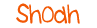
<style>
.page{position:relative;width:97px;height:28px;background:#ffffff}
.page>*{position:absolute;margin:0}
.t1{font:30.6px "BrookeShappell8";color:#f15805}
</style>
<div class="page">
<p class="t1" style="left:16px;top:3px;width:64px;height:21px">Shodh</p>
</div>
